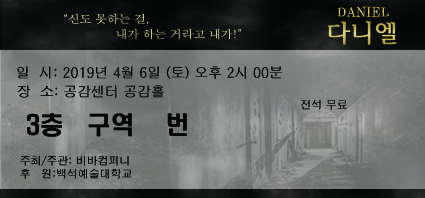
<style>
.page{position:relative;width:425px;height:198px}
.page>*{position:absolute;margin:0}
.t1{font:11px "Century";letter-spacing:0.05em;scale:1.08 1}
.t2{font:11.2px "H2mjsM";letter-spacing:-0.025em;color:#d1ce8e;scale:1.08 1}
.t3{font:11.2px "H2mjsM";letter-spacing:-0.025em;color:#cbc77f;scale:1.08 1}
.t4{font:23px "HCRBatang-Bold";letter-spacing:-0.01em;scale:1.08 1}
.t5{font:14px "H2gprM";letter-spacing:-0.01em;color:#040606}
.t6{font:11px "H2gprM";letter-spacing:-0.01em;color:#040606}
.t7{font:24px "H2hdrM";letter-spacing:-0.01em;color:#040606}
</style>
<div class="page">
<p class="t1" style="left:337px;top:6px;width:52px;height:11px">DANIEL</p>
<p class="t2" style="left:64px;top:13px;width:85px;height:12px">“신도 못하는 걸,</p>
<p class="t3" style="left:116px;top:28px;width:126px;height:12px">내가 하는 거라고 내가!”</p>
<p class="t4" style="left:327px;top:20px;width:70px;height:25px">다니엘</p>
<p class="t5" style="left:17px;top:66px;width:265px;height:13px">일  시: 2019년 4월 6일 (토) 오후 2시 00분</p>
<p class="t5" style="left:17px;top:85px;width:147px;height:13px">장  소: 공감센터 공감홀</p>
<p class="t6" style="left:301px;top:100px;width:46px;height:10px">전석 무료</p>
<p class="t7" style="left:27px;top:113px;width:160px;height:24px">3층   구역    번</p>
<p class="t6" style="left:20px;top:155px;width:109px;height:11px">주최/주관: 비바컴퍼니</p>
<p class="t6" style="left:20px;top:168px;width:112px;height:11px">후   원:백석예술대학교</p>
</div>
